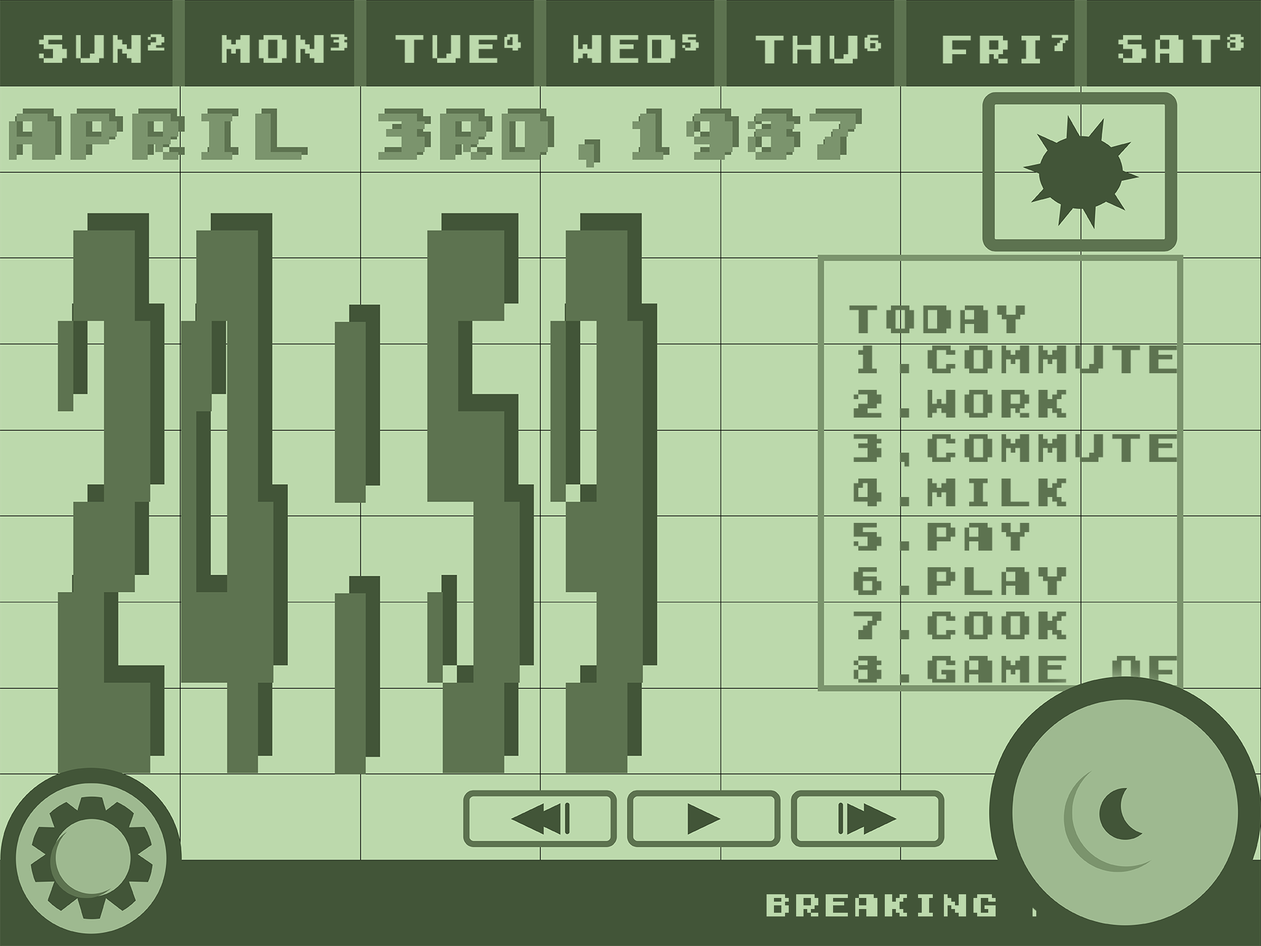
<style>
.page{position:relative;width:1261px;height:946px;background:#bcd9ac}
.page>*{position:absolute;margin:0}
.t1{font:36.9px "GamegirlClassic";color:#bcd9ac}
.t2{font:36.9px "GamegirlClassic";color:#5d7350}
</style>
<div class="page">
<p class="t1" style="left:39px;top:34px;width:125px;height:29px">SUN2</p>
<p class="t1" style="left:222px;top:34px;width:125px;height:29px">MON3</p>
<p class="t1" style="left:395px;top:34px;width:126px;height:29px">TUE4</p>
<p class="t1" style="left:573px;top:34px;width:126px;height:29px">WED5</p>
<p class="t1" style="left:755px;top:34px;width:126px;height:29px">THU6</p>
<p class="t1" style="left:943px;top:34px;width:125px;height:29px">FRI7</p>
<p class="t1" style="left:1118px;top:34px;width:126px;height:29px">SAT8</p>
<p class="t2" style="left:849px;top:305px;width:176px;height:28px">TODAY</p>
<p class="t2" style="left:853px;top:345px;width:324px;height:427px">1.COMMUTE<br>2.WORK<br>3,COMMUTE<br>4.MILK<br>5.PAY<br>6.PLAY<br>7.COOK<br>8.GAME OF<br>9.CLOUD<br>10.SLEEP</p>
</div>
